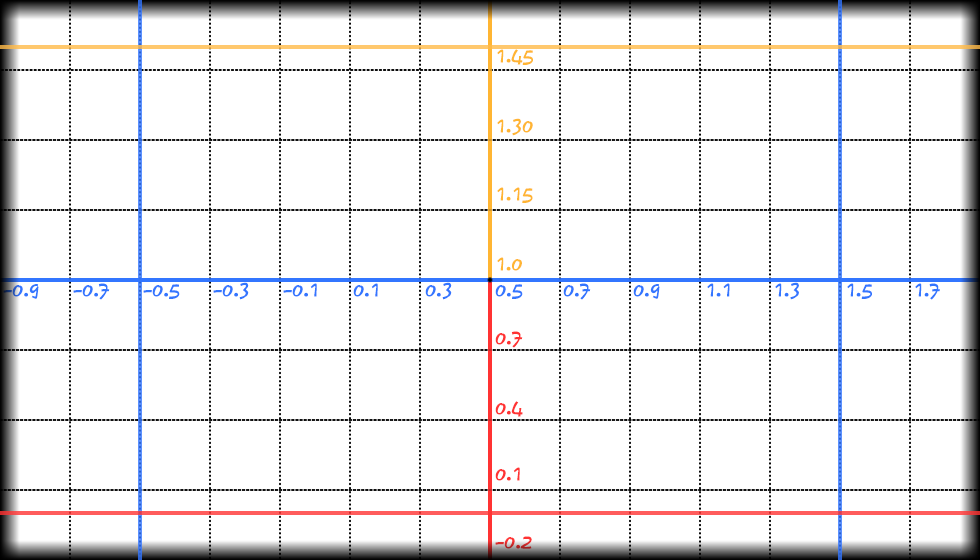
<style>
.page{position:relative;width:980px;height:560px;background:#ffffff}
.page>*{position:absolute;margin:0}
.t1{font:24px "FZKATJW--GB1-0";color:#ffb533}
.t2{font:24px "FZKATJW--GB1-0";color:#3376ff}
.t3{font:24px "FZKATJW--GB1-0";color:#ff3333}
.t4{font:24px "FZKATJW--GB1-0"}
</style>
<div class="page">
<p class="t1" style="left:497px;top:49px;width:36px;height:16px">1.45</p>
<p class="t1" style="left:497px;top:118px;width:36px;height:18px">1.30</p>
<p class="t1" style="left:497px;top:187px;width:36px;height:16px">1.15</p>
<p class="t1" style="left:497px;top:257px;width:25px;height:14px">1.0</p>
<p class="t2" style="left:3px;top:284px;width:36px;height:15px">-0.9</p>
<p class="t2" style="left:73px;top:283px;width:37px;height:17px">-0.7</p>
<p class="t2" style="left:143px;top:284px;width:37px;height:15px">-0.5</p>
<p class="t2" style="left:213px;top:282px;width:36px;height:18px">-0.3</p>
<p class="t2" style="left:283px;top:283px;width:34px;height:14px">-0.1</p>
<p class="t2" style="left:353px;top:283px;width:25px;height:14px">0.1</p>
<p class="t2" style="left:425px;top:282px;width:27px;height:18px">0.3</p>
<p class="t2" style="left:495px;top:284px;width:28px;height:15px">0.5</p>
<p class="t2" style="left:563px;top:283px;width:28px;height:17px">0.7</p>
<p class="t2" style="left:633px;top:284px;width:27px;height:15px">0.9</p>
<p class="t2" style="left:707px;top:283px;width:23px;height:14px">1.1</p>
<p class="t2" style="left:775px;top:282px;width:24px;height:18px">1.3</p>
<p class="t2" style="left:847px;top:283px;width:25px;height:16px">1.5</p>
<p class="t2" style="left:915px;top:283px;width:25px;height:17px">1.7</p>
<p class="t3" style="left:495px;top:331px;width:28px;height:17px">0.7</p>
<p class="t3" style="left:495px;top:401px;width:28px;height:16px">0.4</p>
<p class="t3" style="left:495px;top:467px;width:25px;height:14px">0.1</p>
<p class="t4" style="left:495px;top:536px;width:37px;height:13px">-0.2</p>
</div>
